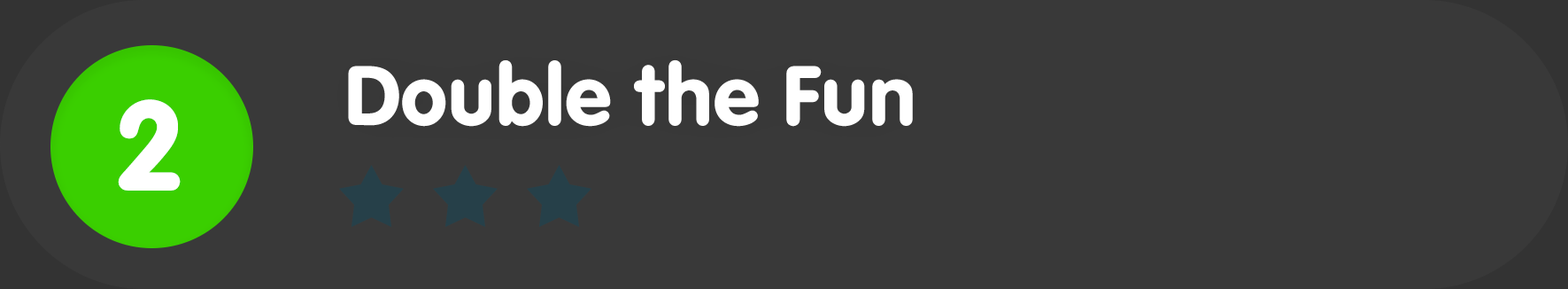
<style>
.page{position:relative;width:1568px;height:289px;background:#393939}
.page>*{position:absolute;margin:0}
.t1{font:88.5px "VAGRundschriftD";color:#ffffff}
.t2{font:132.8px "VAGRundschriftD";color:#ffffff}
</style>
<div class="page">
<p class="t1" style="left:348px;top:59px;width:565px;height:68px">Double the Fun</p>
<p class="t2" style="left:118px;top:99px;width:63px;height:91px">2</p>
</div>
